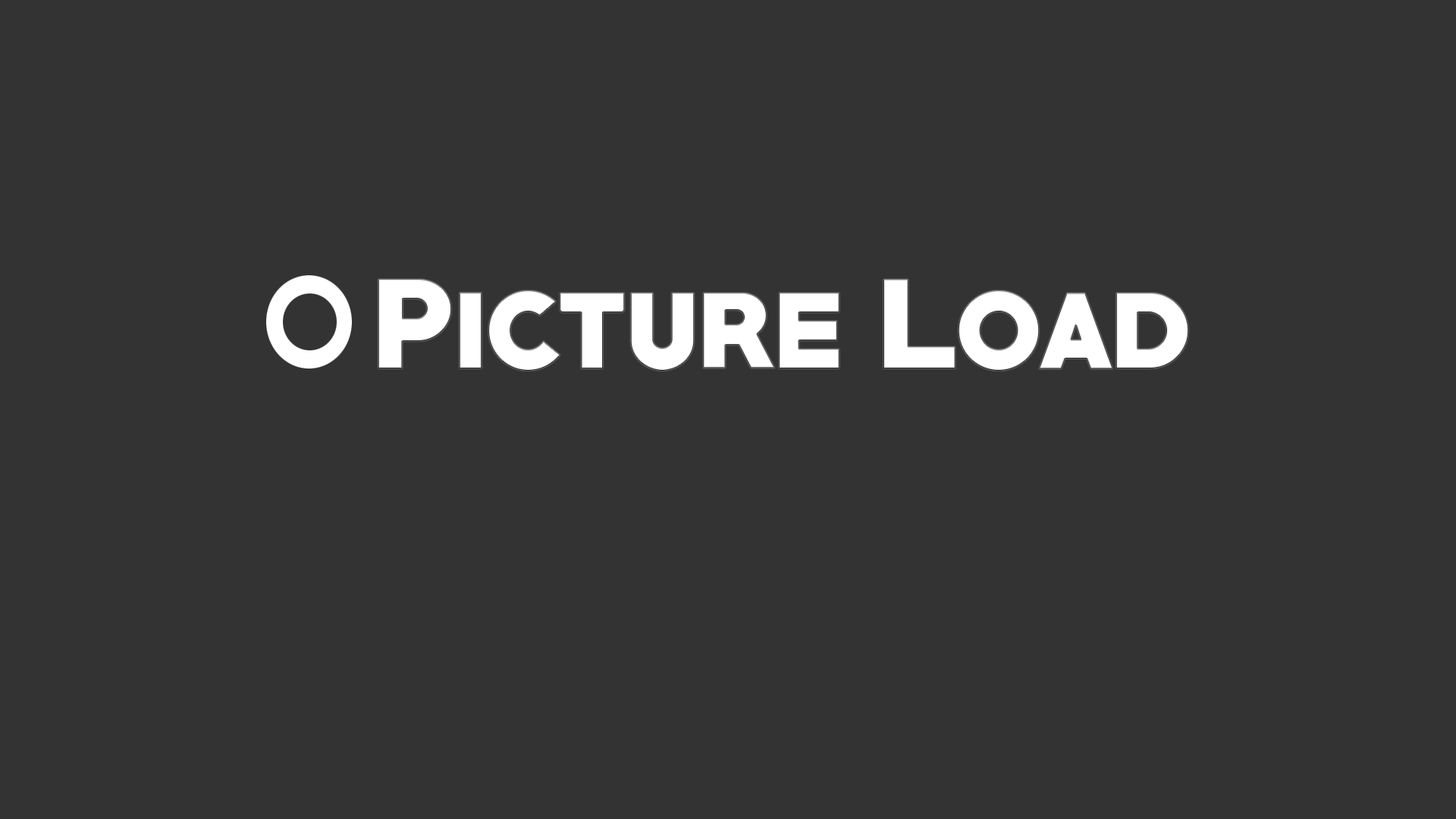
<style>
.page{position:relative;width:1456px;height:819px;background:#333333}
.page>*{position:absolute;margin:0}
.t1{font:115.3px "PRIMETIME-Regular";color:#ffffff}
</style>
<div class="page">
<p class="t1" style="left:378px;top:279px;width:811px;height:92px">Picture Load</p>
</div>
